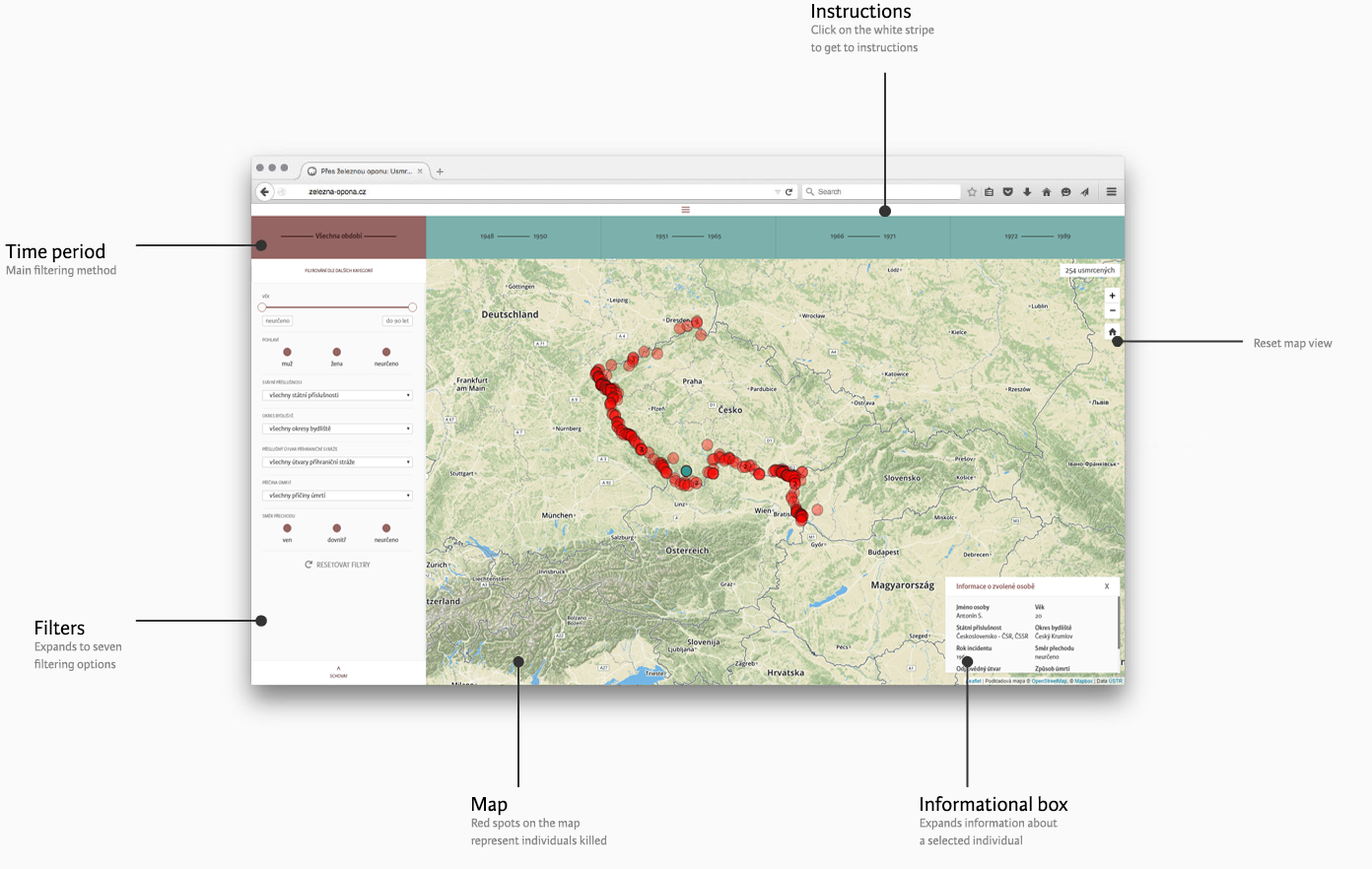
<style>
.page{position:relative;width:1372px;height:869px;background:#fafafa}
.page>*{position:absolute;margin:0}
.t1{font:21px "KarminaSans";color:#000000}
.t2{font:12.8px/17.6px "KarminaSans";color:#888888}
.t3{font:12.8px "KarminaSans";color:#888888}
</style>
<div class="page">
<p class="t1" style="left:812px;top:3px;width:99px;height:16px">Instructions</p>
<p class="t2" style="left:811px;top:25px;width:123px;height:29px">Click on the white stripe<br>to get to instructions</p>
<p class="t1" style="left:5px;top:243px;width:100px;height:20px">Time period</p>
<p class="t3" style="left:6px;top:265px;width:110px;height:12px">Main filtering method</p>
<p class="t3" style="left:1254px;top:338px;width:78px;height:12px">Reset map view</p>
<p class="t1" style="left:35px;top:620px;width:50px;height:16px">Filters</p>
<p class="t2" style="left:34px;top:642px;width:87px;height:29px">Expands to seven<br>filtering options</p>
<p class="t1" style="left:472px;top:797px;width:36px;height:19px">Map</p>
<p class="t1" style="left:920px;top:796px;width:148px;height:16px">Informational box</p>
<p class="t2" style="left:471px;top:818px;width:136px;height:30px">Red spots on the map<br>represent individuals killed</p>
<p class="t2" style="left:919px;top:818px;width:138px;height:28px">Expands information about<br>a selected individual</p>
</div>
